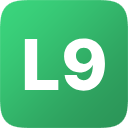
<style>
.page{position:relative;width:128px;height:128px}
.page>*{position:absolute;margin:0}
.t1{font:70px "Inter-ExtraBold";color:#ffffff}
</style>
<div class="page">
<p class="t1" style="left:24px;top:38px;width:81px;height:53px">L9</p>
</div>
